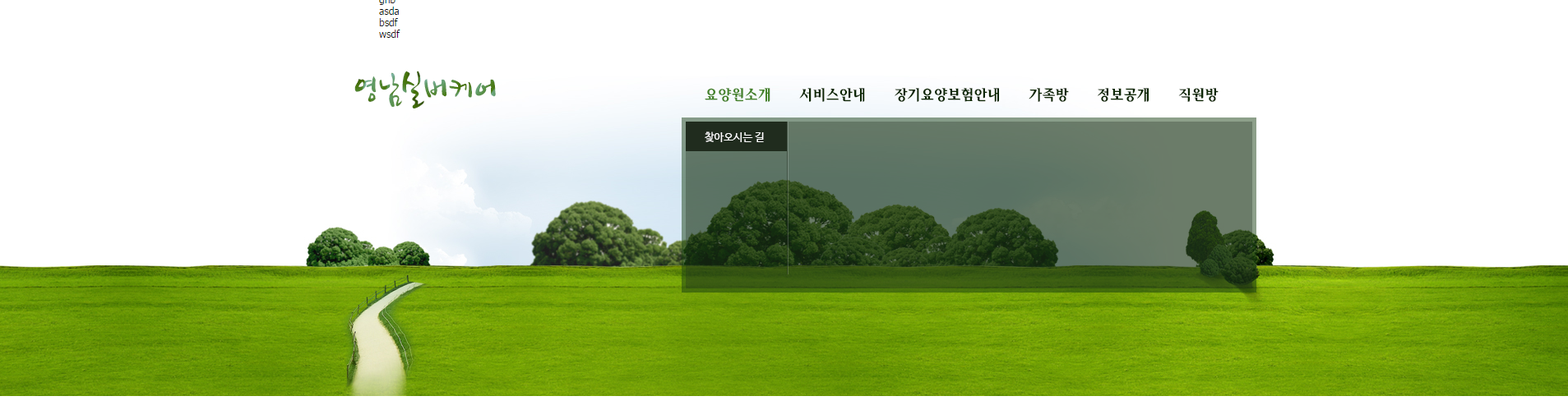
<style>
.page{position:relative;width:1568px;height:410px;background:#ffffff}
.page>*{position:absolute;margin:0}
.t1{font:39.5px "DXSeNB-KSCpc-EUC-H"}
.t2{font:14.8px "HaanSollipM";color:#0d2702}
.t3{font:14.8px "HaanSollipM";color:#45832b}
.t4{font:10.7px "NanumBarunGothic";color:#ffffff}
</style>
<div class="page">
<p class="t1" style="left:354px;top:71px;width:142px;height:38px">영남실버케어</p>
<p class="t2" style="left:705px;top:88px;width:514px;height:14px"><span class="t3">요양원소개</span>     서비스안내     장기요양보험안내     가족방     정보공개     직원방</p>
<p class="t4" style="left:705px;top:132px;width:59px;height:10px">찾아오시는 길</p>
</div>
